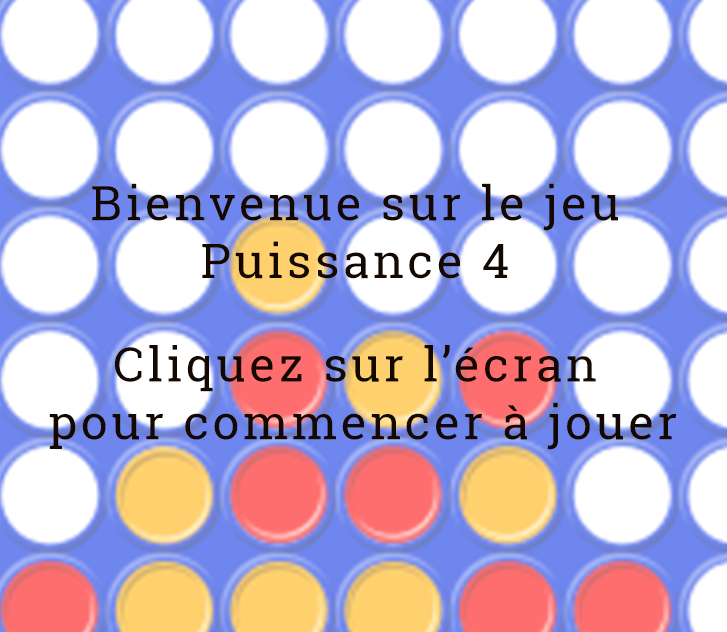
<style>
.page{position:relative;width:727px;height:632px;background:#ffffff}
.page>*{position:absolute;margin:0}
.t1{font:48px/11.5px "RobotoSlab-Regular";letter-spacing:0.075em;color:#150800}
</style>
<div class="page">
<p class="t1" style="left:49px;top:183px;width:628px;height:267px;text-align:center">Bienvenue sur le jeu<br><br><br><br><br>Puissance 4<br><br><br><br><br><br><br><br><br>Cliquez sur l’écran<br><br><br><br><br> pour commencer à jouer</p>
</div>
